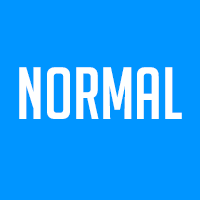
<style>
.page{position:relative;width:200px;height:200px;background:#0095ff}
.page>*{position:absolute;margin:0}
.t1{font:72px "BigNoodleTitling";color:#feffff}
</style>
<div class="page">
<p class="t1" style="left:19px;top:67px;width:163px;height:52px">NORMAL</p>
</div>
